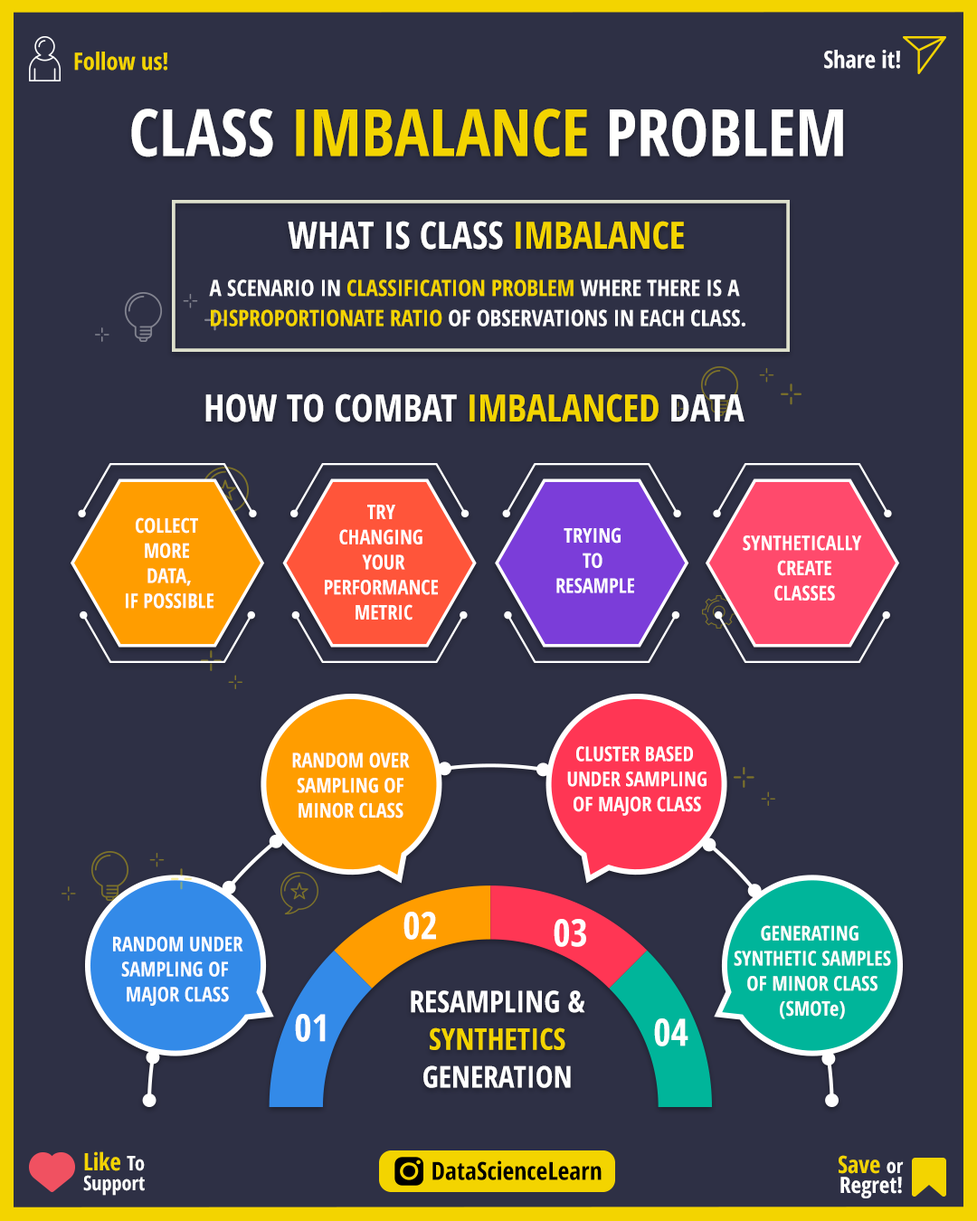
<style>
.page{position:relative;width:977px;height:1221px;background:#2e3045}
.page>*{position:absolute;margin:0}
.t1{font:23.9px "OpenSans-CondensedBold";color:#f3d400}
.t2{font:23.9px "OpenSans-CondensedBold";color:#ffffff}
.t3{font:65.3px "OpenSans-CondensedBold";color:#f3d400}
.t4{font:65.3px "OpenSans-CondensedBold";color:#fffffe}
.t5{font:37.7px "OpenSans-CondensedBold";color:#ffffff}
.t6{font:37.7px "OpenSans-CondensedBold";color:#f3d400}
.t7{font:22.6px/30.1px "OpenSans-CondensedBold";color:#ffffff}
.t8{font:22.6px/30.1px "OpenSans-CondensedBold";color:#f3d400}
.t9{font:20.1px/25.1px "OpenSans-CondensedBold";color:#fffffe}
.t10{font:20.1px/25.1px "OpenSans-CondensedBold";color:#fefefe}
.t11{font:20.1px/25.1px "OpenSans-CondensedBold";color:#ffffff}
.t12{font:37.7px "OpenSans-CondensedBold";color:#fffffe}
.t13{font:30.1px/37.7px "OpenSans-CondensedBold";color:#ffffff}
.t14{font:30.1px/37.7px "OpenSans-CondensedBold";color:#f3d400}
.t15{font:20.1px/20.1px "OpenSans-CondensedBold";color:#ffffff}
.t16{font:23.9px/20.1px "OpenSans-CondensedBold";color:#f3d400}
.t17{font:22.6px/20.1px "OpenSans-CondensedBold";color:#ffffff}
.t18{font:25.1px "OpenSans-CondensedBold";color:#000000}
</style>
<div class="page">
<p class="t1" style="left:74px;top:52px;width:93px;height:19px">Follow us!</p>
<p class="t2" style="left:824px;top:50px;width:76px;height:19px">Share it!</p>
<p class="t3" style="left:131px;top:109px;width:712px;height:48px"><span class="t4">CLASS </span>IMBALANCE <span class="t4">PROBLEM</span></p>
<p class="t5" style="left:288px;top:221px;width:396px;height:29px">WHAT IS CLASS <span class="t6">IMBALANCE</span></p>
<p class="t7" style="left:209px;top:279px;width:536px;height:47px">A SCENARIO IN <span class="t8">CLASSIFICATION PROBLEM</span> WHERE THERE IS A <br><span class="t8">DISPROPORTIONATE RATIO </span>OF OBSERVATIONS IN EACH CLASS.</p>
<p class="t5" style="left:205px;top:393px;width:539px;height:29px">HOW TO COMBAT <span class="t6">IMBALANCED </span>DATA</p>
<p class="t9" style="left:325px;top:505px;width:113px;height:115px;text-align:center">TRY <br>CHANGING <br>YOUR<br>PERFORMANCE <br>METRIC</p>
<p class="t10" style="left:126px;top:517px;width:87px;height:92px;text-align:center">COLLECT <br>MORE <br>DATA,<br>IF POSSIBLE</p>
<p class="t9" style="left:556px;top:527px;width:78px;height:66px;text-align:center">TRYING <br>TO <br>RESAMPLE</p>
<p class="t9" style="left:742px;top:535px;width:120px;height:65px;text-align:center">SYNTHETICALLY <br>CREATE<br>CLASSES</p>
<p class="t11" style="left:567px;top:746px;width:139px;height:70px;text-align:center">CLUSTER BASED <br>UNDER SAMPLING<br>OF MAJOR CLASS</p>
<p class="t11" style="left:292px;top:752px;width:118px;height:66px;text-align:center">RANDOM OVER<br>SAMPLING OF<br>MINOR CLASS</p>
<p class="t12" style="left:403px;top:912px;width:33px;height:28px">02</p>
<p class="t12" style="left:553px;top:919px;width:33px;height:28px">03</p>
<p class="t11" style="left:733px;top:925px;width:158px;height:94px;text-align:center">GENERATING <br>SYNTHETIC SAMPLES<br>OF MINOR CLASS<br>(SMOTe)</p>
<p class="t11" style="left:113px;top:936px;width:130px;height:70px;text-align:center">RANDOM UNDER<br>SAMPLING OF <br>MAJOR CLASS</p>
<p class="t13" style="left:411px;top:990px;width:174px;height:98px;text-align:center">RESAMPLING &amp;<br><span class="t14">SYNTHETICS<br></span>GENERATION</p>
<p class="t12" style="left:295px;top:1014px;width:31px;height:28px">01</p>
<p class="t12" style="left:654px;top:1018px;width:34px;height:28px">04</p>
<p class="t15" style="left:83px;top:1151px;width:62px;height:45px"><span class="t16">Like </span>To<br>Support</p>
<p class="t17" style="left:838px;top:1155px;width:65px;height:43px;text-align:right"><span class="t16">Save </span><span class="t15">or<br></span>Regret!</p>
<p class="t18" style="left:432px;top:1160px;width:169px;height:20px">DataScienceLearn</p>
</div>
